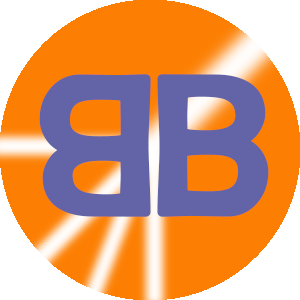
<style>
.page{position:relative;width:300px;height:300px;background:#fc7f03}
.page>*{position:absolute;margin:0}
.t1{font:200px "BerlinSansFB-Reg";letter-spacing:-0.01em;color:#6264a7;font-weight:bold}
</style>
<div class="page">
<p class="t1" style="left:39px;top:74px;width:112px;height:143px;rotate:180deg">B</p>
<p class="t1" style="left:157px;top:74px;width:112px;height:143px">B</p>
</div>
